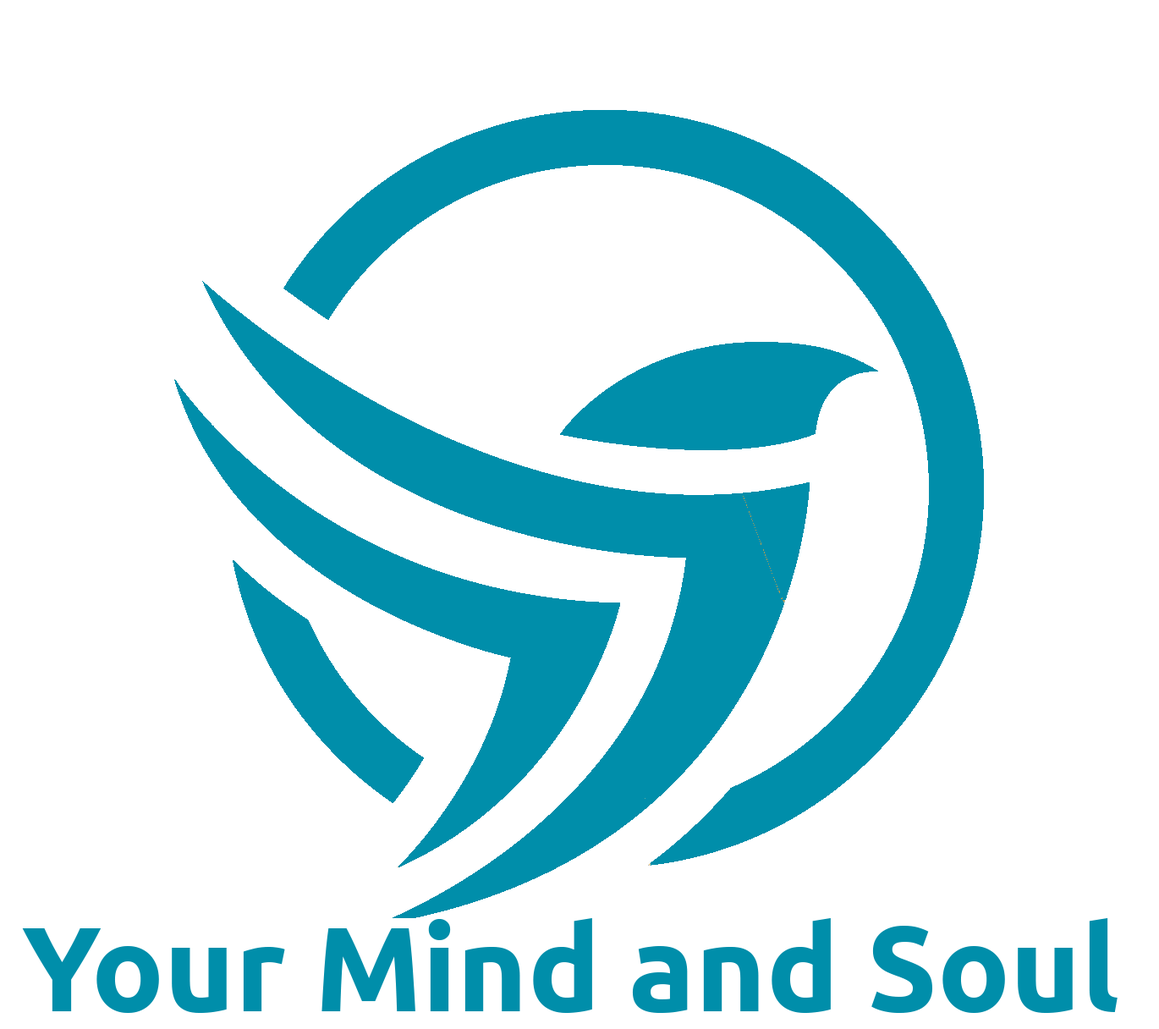
<style>
.page{position:relative;width:1159px;height:1029px;background:#ffffff}
.page>*{position:absolute;margin:0}
.t1{font:120.1px "Ubuntu-Bold";color:#008eaa}
</style>
<div class="page">
<p class="t1" style="left:22px;top:918px;width:1096px;height:95px">Your Mind and Soul</p>
</div>
